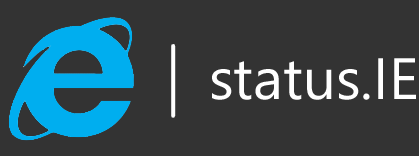
<style>
.page{position:relative;width:419px;height:156px;background:#333333}
.page>*{position:absolute;margin:0}
.t1{font:58.3px "SegoeUI";color:#ffffff}
</style>
<div class="page">
<p class="t1" style="left:212px;top:58px;width:204px;height:42px">status.IE</p>
</div>
